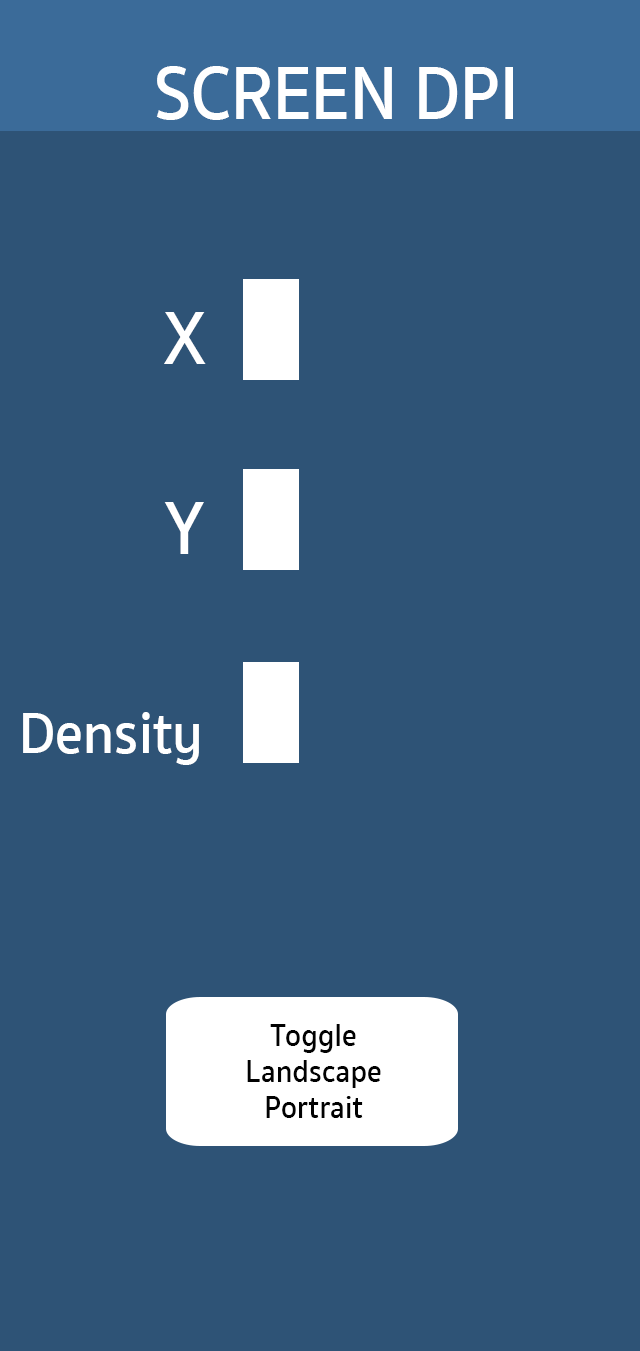
<style>
.page{position:relative;width:640px;height:1351px;background:#2e5376}
.page>*{position:absolute;margin:0}
.t1{font:76.6px "SukhumvitSet-SemiBold";color:#ffffff;scale:0.91 1}
.t2{font:60.4px "SukhumvitSet-SemiBold";color:#ffffff;scale:0.91 1}
.t3{font:32.2px/36px "SukhumvitSet-SemiBold";color:#010101;scale:0.91 1}
</style>
<div class="page">
<p class="t1" style="left:156px;top:66px;width:357px;height:54px">SCREEN DPI</p>
<p class="t1" style="left:164px;top:312px;width:42px;height:52px">X</p>
<p class="t1" style="left:164px;top:502px;width:40px;height:52px">Y</p>
<p class="t2" style="left:23px;top:712px;width:176px;height:53px">Density</p>
<p class="t3" style="left:247px;top:1024px;width:134px;height:94px;text-align:center">Toggle<br>Landscape<br>Portrait</p>
</div>
